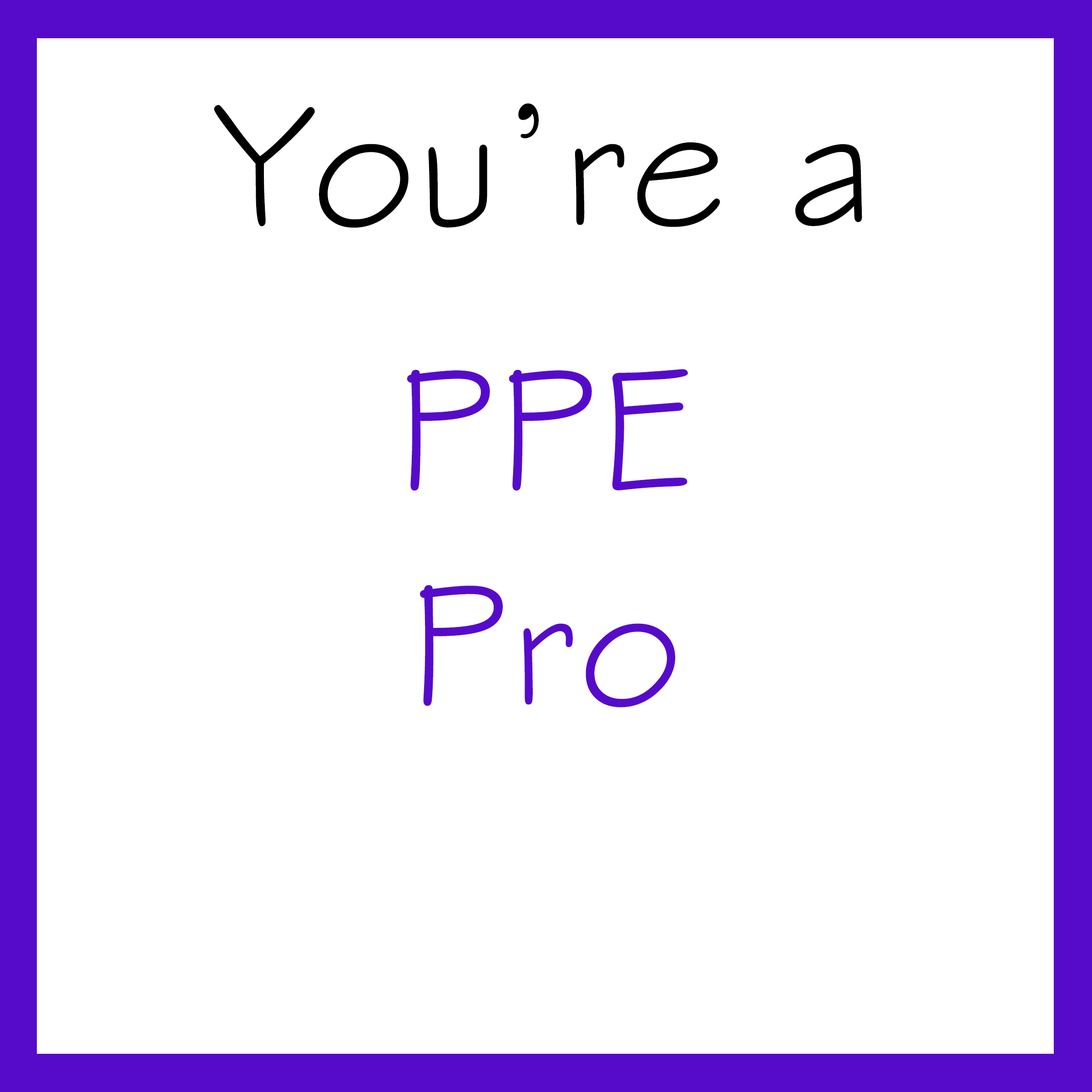
<style>
.page{position:relative;width:1092px;height:1092px;background:#ffffff}
.page>*{position:absolute;margin:0}
.t1{font:179.5px "StylusBT";letter-spacing:0.01em;color:#000000}
.t2{font:179.4px "StylusBT";letter-spacing:0.01em;color:#570bca}
</style>
<div class="page">
<p class="t1" style="left:214px;top:103px;width:648px;height:125px">You’re a</p>
<p class="t2" style="left:407px;top:369px;width:281px;height:339px;text-align:center">PPE<br>Pro</p>
</div>
